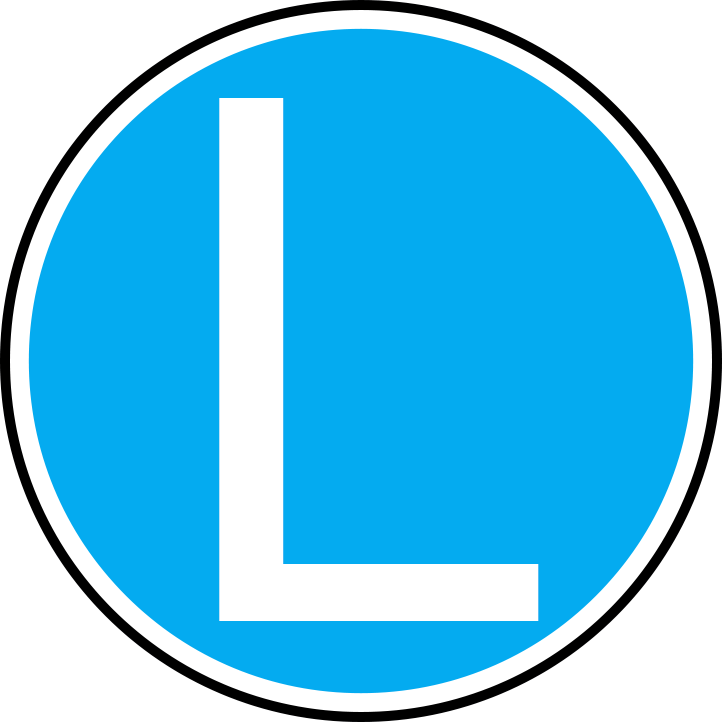
<style>
.page{position:relative;width:722px;height:722px;background:#04abf0}
.page>*{position:absolute;margin:0}
.t1{font:800px "Corbel";color:#ffffff}
</style>
<div class="page">
<p class="t1" style="left:219px;top:98px;width:320px;height:523px">L</p>
</div>
